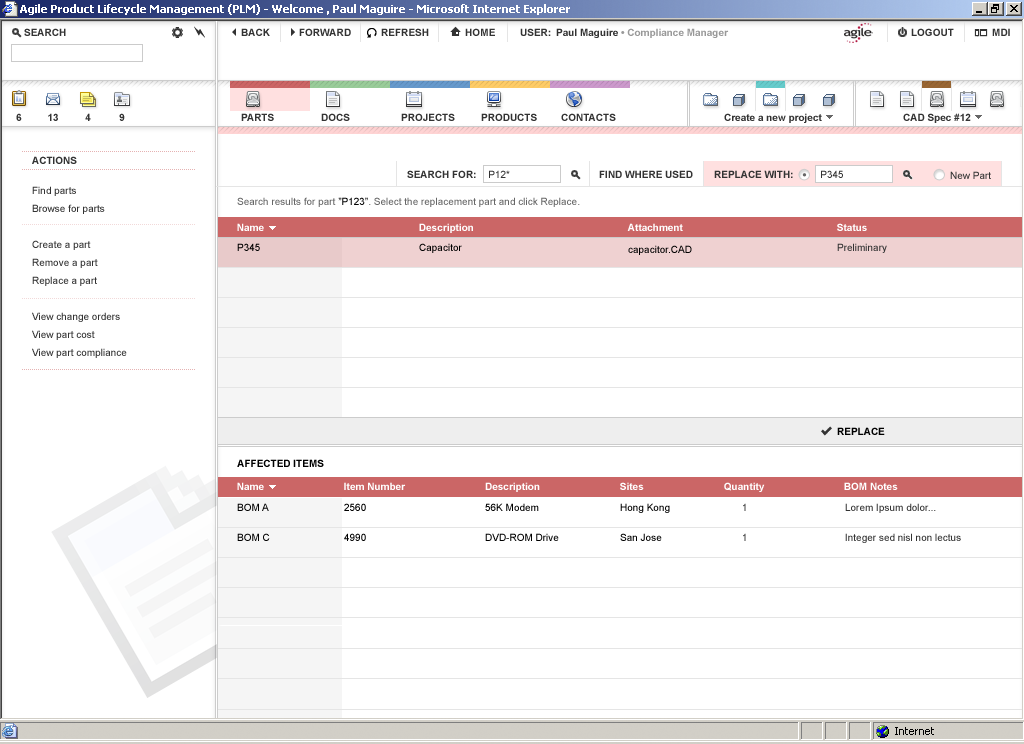
<style>
.page{position:relative;width:1024px;height:744px;background:#ffffff}
.page>*{position:absolute;margin:0}
.t1{font:10px "Arial-BoldMT";color:#333333}
.t2{font:10px "ArialMT";color:#333333}
.t3{font:10px/18px "ArialMT";color:#333333}
.t4{font:10px "ArialMT";color:#666666}
.t5{font:10px "ArialMT";color:#000000}
.t6{font:10px "Arial-BoldMT";color:#ffffff}
.t7{font:10px "Arial-BoldMT";color:#000000}
.t8{font:10px/10px "ArialMT";color:#000000}
.t9{font:10px/10px "ArialMT"}
.t10{font:10px/10px "ArialMT";color:#333333}
</style>
<div class="page">
<p class="t1" style="left:32px;top:156px;width:45px;height:8px">ACTIONS</p>
<p class="t1" style="left:407px;top:170px;width:69px;height:8px">SEARCH FOR:</p>
<p class="t2" style="left:489px;top:170px;width:21px;height:8px">P12*</p>
<p class="t1" style="left:599px;top:170px;width:94px;height:8px">FIND WHERE USED</p>
<p class="t1" style="left:714px;top:170px;width:79px;height:8px">REPLACE WITH:</p>
<p class="t2" style="left:821px;top:170px;width:22px;height:8px">P345</p>
<p class="t2" style="left:950px;top:171px;width:41px;height:8px">New Part</p>
<p class="t3" style="left:32px;top:186px;width:95px;height:172px">Find parts<br>Browse for parts<br><br>Create a part<br>Remove a part<br>Replace a part<br><br>View change orders<br>View part cost<br>View part compliance</p>
<p class="t4" style="left:237px;top:197px;width:343px;height:10px">Search results for part <span class="t5">”P123”</span>. Select the replacement part and click Replace.</p>
<p class="t6" style="left:237px;top:223px;width:27px;height:8px">Name</p>
<p class="t6" style="left:419px;top:223px;width:54px;height:10px">Description</p>
<p class="t6" style="left:627px;top:223px;width:56px;height:8px">Attachment</p>
<p class="t6" style="left:837px;top:223px;width:30px;height:8px">Status</p>
<p class="t5" style="left:237px;top:243px;width:23px;height:8px">P345</p>
<p class="t5" style="left:419px;top:243px;width:43px;height:10px">Capacitor</p>
<p class="t5" style="left:628px;top:245px;width:64px;height:10px">capacitor.CAD</p>
<p class="t2" style="left:837px;top:243px;width:50px;height:10px">Preliminary</p>
<p class="t7" style="left:837px;top:427px;width:48px;height:8px">REPLACE</p>
<p class="t7" style="left:237px;top:459px;width:87px;height:8px">AFFECTED ITEMS</p>
<p class="t6" style="left:237px;top:482px;width:27px;height:8px">Name</p>
<p class="t6" style="left:344px;top:482px;width:62px;height:8px">Item Number</p>
<p class="t6" style="left:485px;top:482px;width:55px;height:10px">Description</p>
<p class="t6" style="left:620px;top:482px;width:24px;height:8px">Sites</p>
<p class="t6" style="left:724px;top:482px;width:41px;height:10px">Quantity</p>
<p class="t6" style="left:844px;top:482px;width:54px;height:8px">BOM Notes</p>
<p class="t8" style="left:237px;top:503px;width:33px;height:38px">BOM A<br><br><br>BOM C</p>
<p class="t8" style="left:344px;top:503px;width:22px;height:38px">2560<br><br><br>4990</p>
<p class="t8" style="left:485px;top:503px;width:74px;height:38px">56K Modem<br><br><br>DVD-ROM Drive</p>
<p class="t8" style="left:620px;top:503px;width:50px;height:38px">Hong Kong<br><br><br>San Jose</p>
<p class="t9" style="left:743px;top:503px;width:3px;height:38px">1<br><br><br>1</p>
<p class="t10" style="left:845px;top:503px;width:116px;height:40px">Lorem Ipsum dolor...<br><br><br>Integer sed nisl non lectus</p>
</div>
